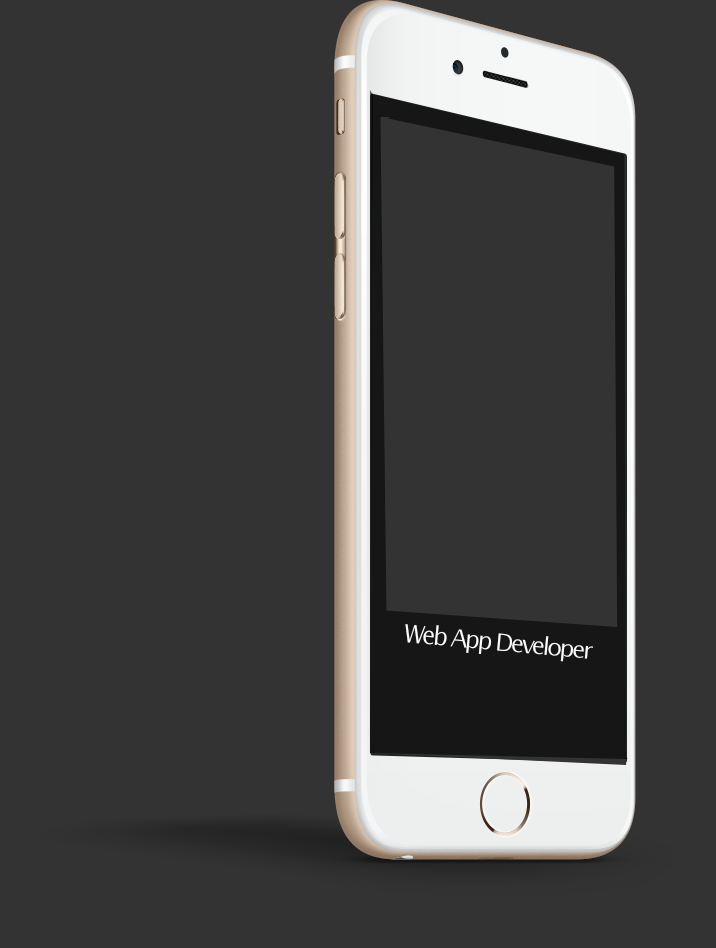
<style>
.page{position:relative;width:716px;height:948px;background:#333333}
.page>*{position:absolute;margin:0}
.t1{font:24px "LucidaSansUnicode";letter-spacing:-0.1em;color:#ffffff}
</style>
<div class="page">
<p class="t1" style="left:405px;top:624px;width:189px;height:38px;rotate:5deg">Web App Developer</p>
</div>
